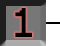
<style>
.page{position:relative;width:60px;height:46px;background:#777777}
.page>*{position:absolute;margin:0}
.t1{font:33.1px "Terminal";color:#000000}
</style>
<div class="page">
<p class="t1" style="left:15px;top:8px;width:17px;height:29px">1</p>
</div>
